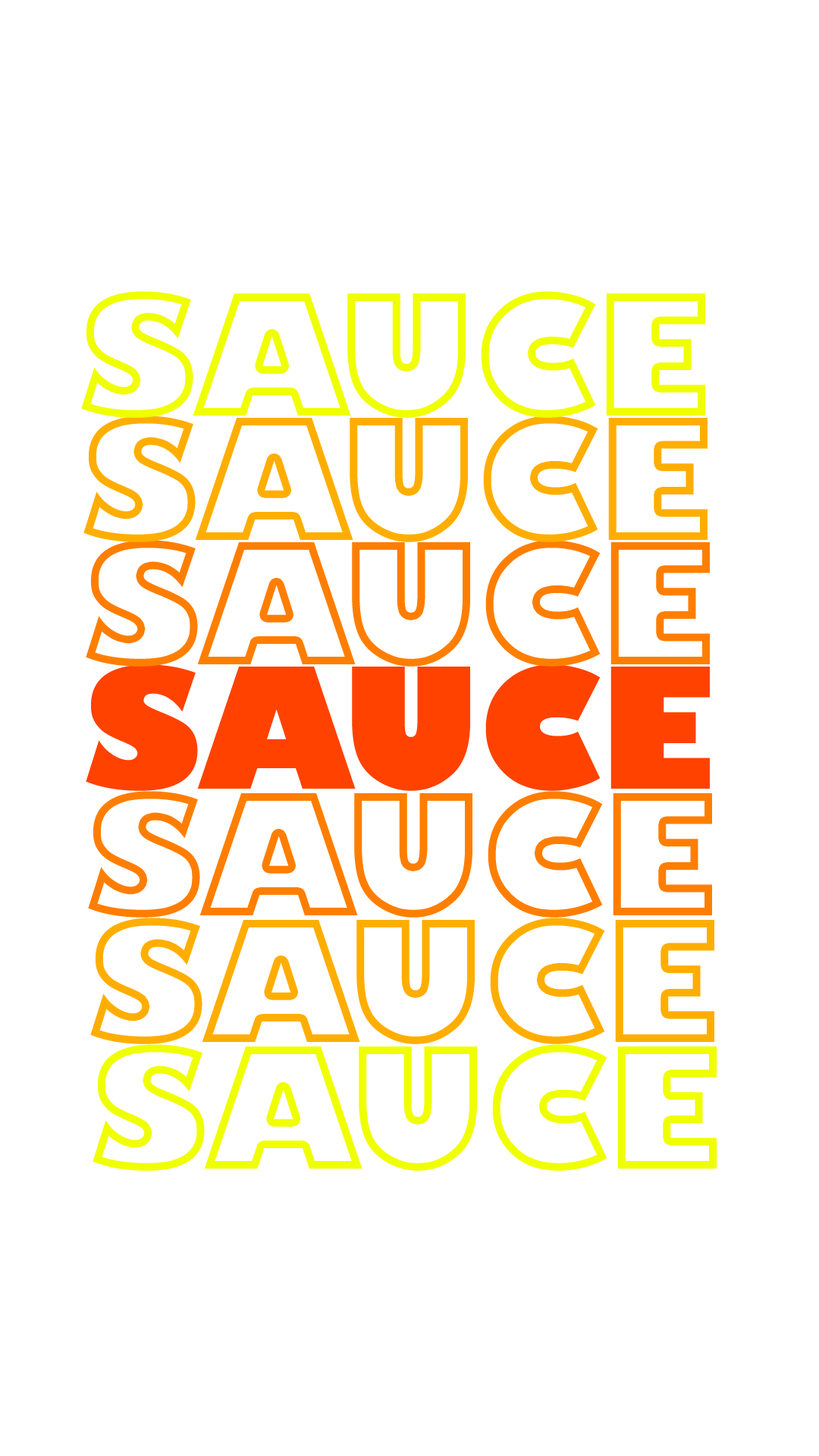
<style>
.page{position:relative;width:819px;height:1456px;background:#ffffff}
.page>*{position:absolute;margin:0}
.t1{font:163.8px "GillSans-UltraBold";letter-spacing:-0.016em}
.t2{font:163.8px "GillSans-UltraBold";letter-spacing:-0.016em;color:#ff4200}
</style>
<div class="page">
<p class="t1" style="left:81px;top:291px;width:624px;height:127px">SAUCE</p>
<p class="t1" style="left:83px;top:416px;width:625px;height:126px">SAUCE</p>
<p class="t1" style="left:86px;top:540px;width:624px;height:127px">SAUCE</p>
<p class="t2" style="left:86px;top:664px;width:624px;height:127px">SAUCE</p>
<p class="t1" style="left:88px;top:791px;width:624px;height:127px">SAUCE</p>
<p class="t1" style="left:90px;top:918px;width:624px;height:126px">SAUCE</p>
<p class="t1" style="left:93px;top:1044px;width:624px;height:127px">SAUCE</p>
</div>
